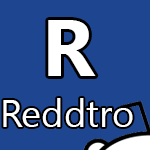
<style>
.page{position:relative;width:150px;height:150px;background:#1d4590}
.page>*{position:absolute;margin:0}
.t1{font:80px "SegoeUI-Bold";color:#ffffff}
.t2{font:38px "SegoeUI";color:#ffffff}
</style>
<div class="page">
<p class="t1" style="left:48px;top:20px;width:48px;height:56px">R</p>
<p class="t2" style="left:3px;top:98px;width:130px;height:29px">Reddtro</p>
</div>
